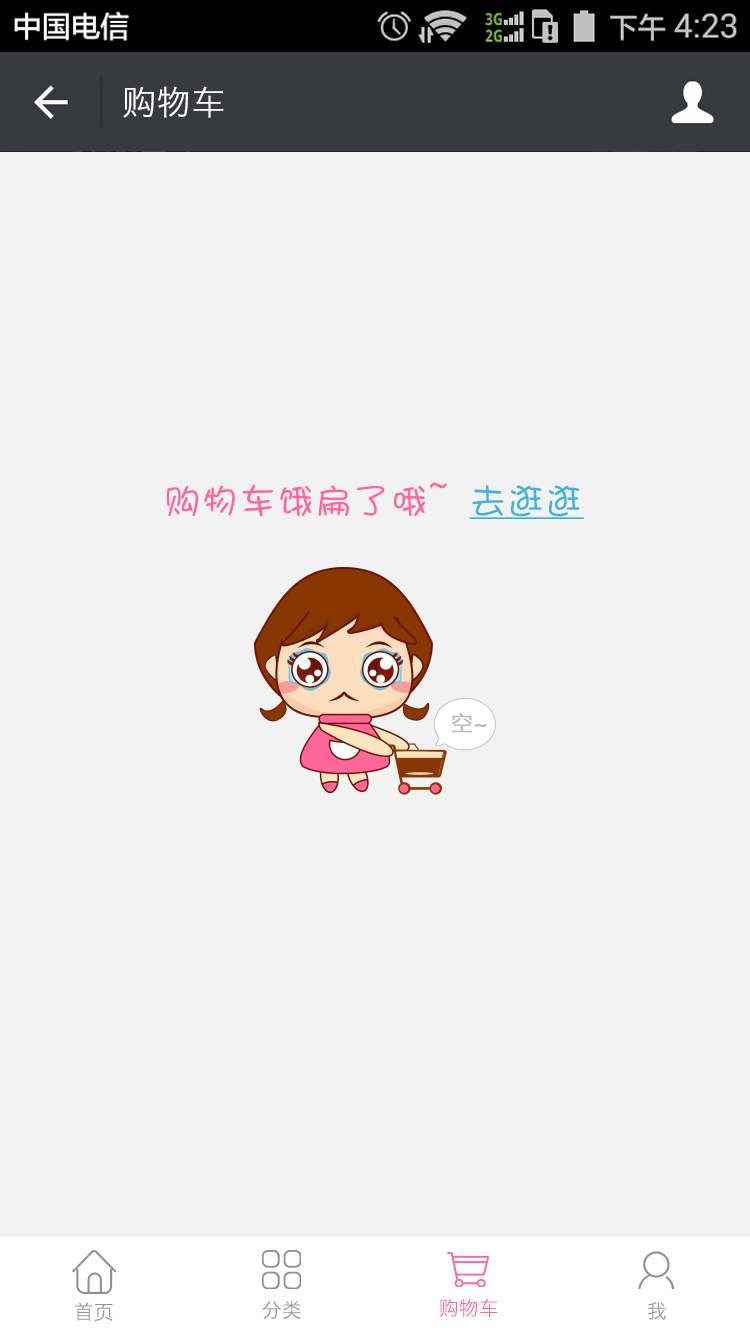
<style>
.page{position:relative;width:750px;height:1334px;background:#f2f2f2}
.page>*{position:absolute;margin:0}
.t1{font:34px "HiraginoSansGB-W3";letter-spacing:0.022em;color:#ffffff}
.t2{font:36px "DFShaoNvW5";letter-spacing:0.05em;color:#ff6699}
.t3{font:36px "DFShaoNvW5";letter-spacing:0.05em;color:#3eb3dd;text-decoration:underline}
.t4{font:22.1px "HiraginoSansGB-W3";color:#bcb9ba;font-weight:bold}
.t5{font:20px "HiraginoSansGB-W3";color:#929192}
.t6{font:20px "HiraginoSansGB-W3";color:#ff6699}
</style>
<div class="page">
<p class="t1" style="left:123px;top:86px;width:101px;height:32px">购物车</p>
<p class="t2" style="left:166px;top:482px;width:418px;height:37px">购物车饿扁了哦~ <span class="t3">去逛逛</span></p>
<p class="t4" style="left:451px;top:712px;width:36px;height:21px">空~</p>
<p class="t5" style="left:75px;top:1302px;width:38px;height:19px">首页</p>
<p class="t5" style="left:262px;top:1300px;width:39px;height:19px">分类</p>
<p class="t6" style="left:439px;top:1298px;width:59px;height:19px">购物车</p>
<p class="t5" style="left:648px;top:1302px;width:18px;height:18px">我</p>
</div>
